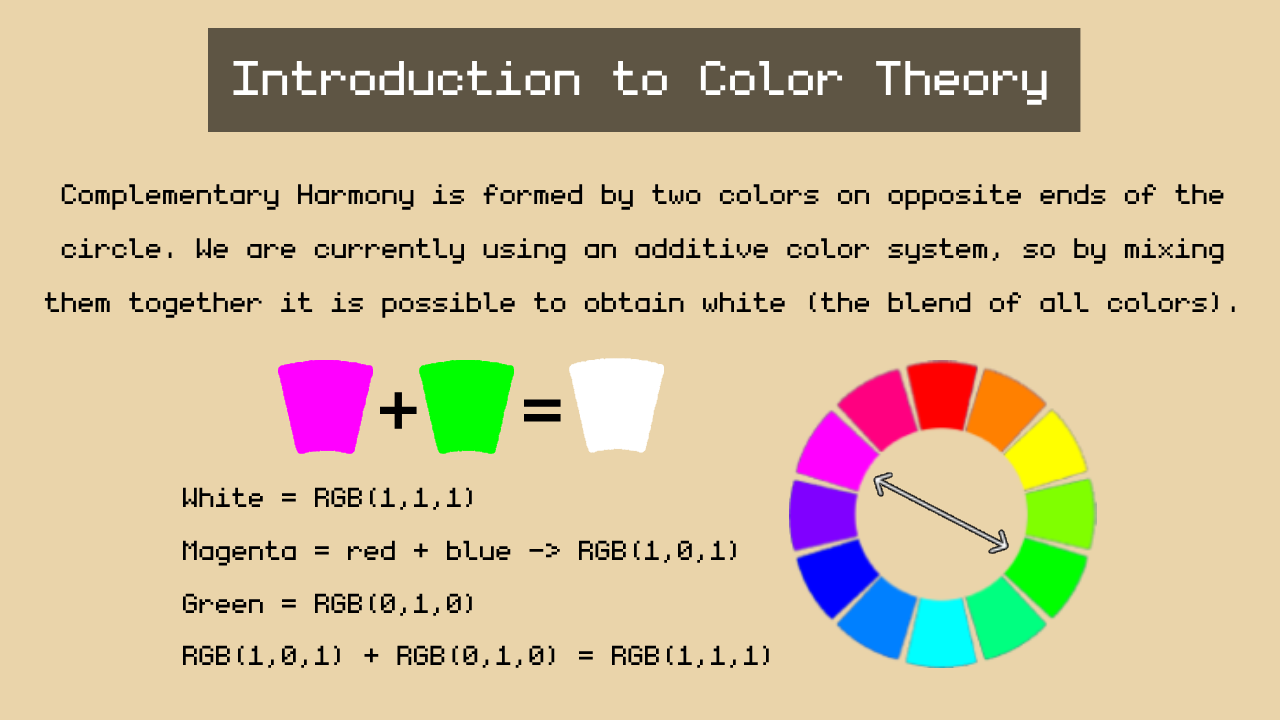
<style>
.page{position:relative;width:1280px;height:720px;background:#ead4aa}
.page>*{position:absolute;margin:0}
.t1{font:77.9px "monogram";color:#ffffff}
.t2{font:45px "monogram";color:#000000}
.t3{font:117px "monogram";color:#000000}
.t4{font:44px "monogram";color:#000000}
</style>
<div class="page">
<p class="t1" style="left:233px;top:61px;width:814px;height:44px">Introduction to Color Theory</p>
<p class="t2" style="left:44px;top:184px;width:1191px;height:134px;text-align:center">Complementary Harmony is formed by two colors on opposite ends of the<br>circle. We are currently using an additive color system, so by mixing<br>them together it is possible to obtain white (the blend of all colors).</p>
<p class="t3" style="left:379px;top:392px;width:38px;height:37px">+</p>
<p class="t3" style="left:523px;top:399px;width:38px;height:23px">=</p>
<p class="t4" style="left:183px;top:487px;width:586px;height:181px">White = RGB(1,1,1)<br>Magenta = red + blue -&gt; RGB(1,0,1)<br>Green = RGB(0,1,0)<br>RGB(1,0,1) + RGB(0,1,0) = RGB(1,1,1)</p>
</div>
